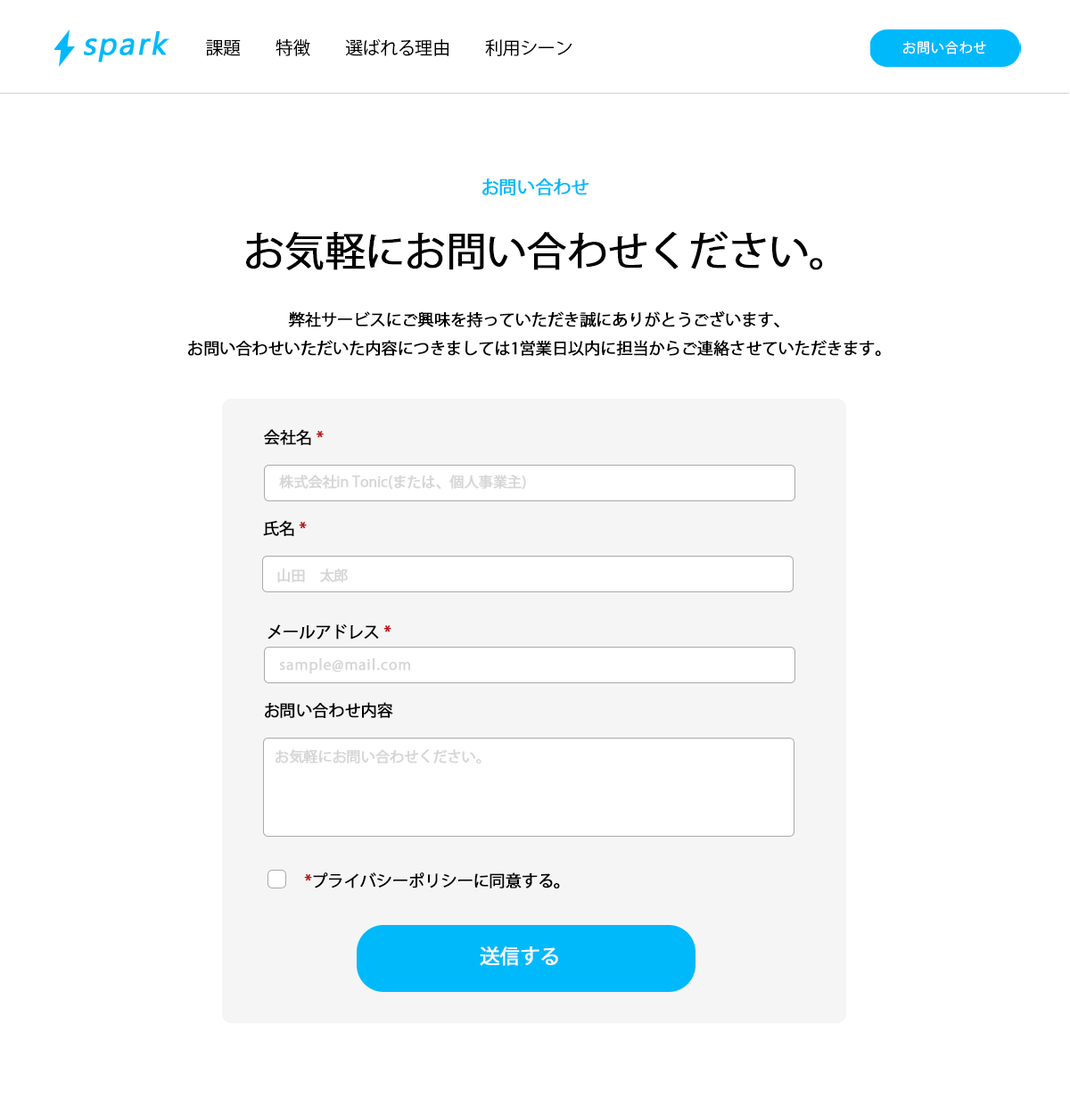
<style>
.page{position:relative;width:1070px;height:1115px;background:#ffffff}
.page>*{position:absolute;margin:0}
.t1{font:17.8px "KozGoPr6N-Regular";letter-spacing:-0.02em;color:#000000}
.t2{font:17.8px "KozGoPr6N-Regular";letter-spacing:-0.02em;color:#00b9fb;font-weight:bold}
.t3{font:40.1px "KozGoPr6N-Regular";letter-spacing:-0.02em;color:#000000;font-weight:bold}
.t4{font:16px "KozGoPr6N-Regular";letter-spacing:-0.02em;color:#000000;font-weight:bold}
.t5{font:16px "KozGoPr6N-Regular";letter-spacing:-0.02em;color:#bf1616;font-weight:bold}
.t6{font:14.3px "KozGoPr6N-Regular";letter-spacing:-0.02em;color:#d6d6d6;font-weight:bold}
.t7{font:14.3px "KozGoPr6N-Regular";letter-spacing:0.05em;color:#d6d6d6;font-weight:bold}
.t8{font:19.6px "KozGoPr6N-Regular";color:#ffffff;font-weight:bold}
</style>
<div class="page">
<p class="t1" style="left:206px;top:38px;width:366px;height:18px">課題　　特徴　　選ばれる理由　　利用シーン</p>
<p class="t2" style="left:482px;top:178px;width:106px;height:18px">お問い合わせ</p>
<p class="t3" style="left:246px;top:231px;width:577px;height:39px">お気軽にお問い合わせください。</p>
<p class="t4" style="left:188px;top:310px;width:693px;height:46px;text-align:center">弊社サービスにご興味を持っていただき誠にありがとうございます、<br>お問い合わせいただいた内容につきましては1営業日以内に担当からご連絡させていただきます。</p>
<p class="t4" style="left:264px;top:429px;width:60px;height:16px">会社名 <span class="t5">*</span></p>
<p class="t6" style="left:279px;top:474px;width:247px;height:15px">株式会社in Tonic(または、個人事業主)</p>
<p class="t4" style="left:263px;top:520px;width:44px;height:16px">氏名 <span class="t5">*</span></p>
<p class="t6" style="left:277px;top:568px;width:71px;height:14px">山田　太郎</p>
<p class="t4" style="left:267px;top:623px;width:124px;height:16px">メールアドレス <span class="t5">*</span></p>
<p class="t7" style="left:279px;top:658px;width:131px;height:16px">sample@mail.com</p>
<p class="t4" style="left:265px;top:702px;width:128px;height:16px">お問い合わせ内容</p>
<p class="t6" style="left:276px;top:749px;width:205px;height:14px">お気軽にお問い合わせください。</p>
<p class="t4" style="left:304px;top:872px;width:256px;height:16px"><span class="t5">*</span>プライバシーポリシーに同意する。</p>
<p class="t8" style="left:480px;top:946px;width:78px;height:20px">送信する</p>
</div>
